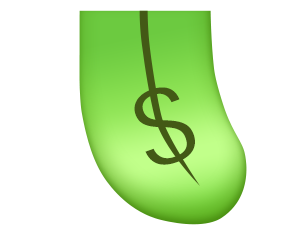
<style>
.page{position:relative;width:284px;height:242px;background:#ffffff}
.page>*{position:absolute;margin:0}
.t1{font:110px "AcuminConcept-CondensedLight";letter-spacing:0.025em;color:#435916;text-transform:uppercase;scale:1.3 1}
</style>
<div class="page">
<p class="t1" style="left:134px;top:87px;width:61px;height:78px;rotate:-20deg">S</p>
</div>
